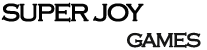
<style>
.page{position:relative;width:207px;height:50px;background:#ffffff}
.page>*{position:absolute;margin:0}
.t1{font:30px "CopperplateGothic-Light";letter-spacing:-0.075em;color:#040404;font-weight:bold}
.t2{font:24px "CopperplateGothic-Light";letter-spacing:-0.075em;color:#161615;font-weight:bold}
</style>
<div class="page">
<p class="t1" style="left:1px;top:2px;width:143px;height:21px">super joy</p>
<p class="t2" style="left:127px;top:32px;width:74px;height:16px">games</p>
</div>
